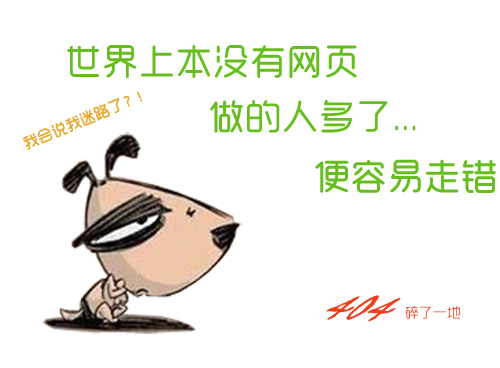
<style>
.page{position:relative;width:500px;height:368px;background:#ffffff}
.page>*{position:absolute;margin:0}
.t1{font:35.9px "RTWSYueRoudGoDemo-Regular";color:#66be1e;font-weight:bold}
.t2{font:15px "RTWSYueRoudGoDemo-Regular";color:#e8a82d;font-weight:bold}
.t3{font:50.4px "VinerHandITC";color:#f13e1a;font-weight:bold;scale:0.72 1}
.t4{font:14px "RTWSYueRoudGoDemo-Regular";color:#f13e1a}
</style>
<div class="page">
<p class="t1" style="left:67px;top:45px;width:290px;height:33px">世界上本没有网页</p>
<p class="t2" style="left:22px;top:91px;width:121px;height:59px;rotate:-23deg">我会说我迷路了？！</p>
<p class="t1" style="left:210px;top:100px;width:206px;height:33px">做的人多了...</p>
<p class="t1" style="left:315px;top:159px;width:181px;height:34px">便容易走错</p>
<p class="t3" style="left:326px;top:295px;width:75px;height:27px;rotate:2deg">404</p>
<p class="t4" style="left:405px;top:306px;width:55px;height:13px">碎了一地</p>
</div>
